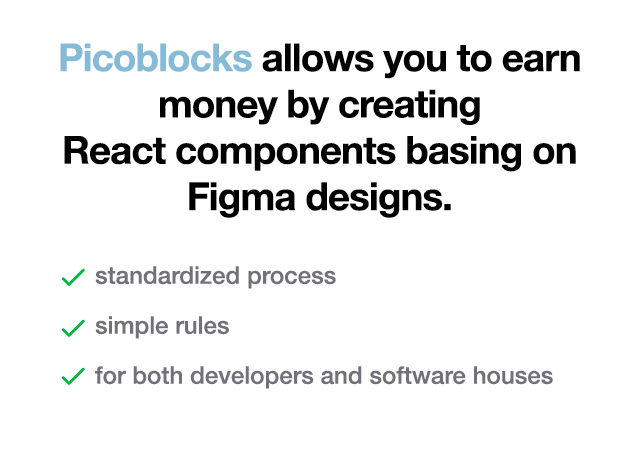
<style>
.page{position:relative;width:640px;height:457px;background:#ffffff}
.page>*{position:absolute;margin:0}
.t1{font:38.6px "HelveticaNeue-Bold";letter-spacing:-0.025em;color:#000000}
.t2{font:38.6px "HelveticaNeue-Bold";letter-spacing:-0.025em;color:#86bbd8}
.t3{font:24.2px/50px "HelveticaNeue-Medium";color:#71717a}
</style>
<div class="page">
<p class="t1" style="left:60px;top:43px;width:520px;height:175px;text-align:center"><span class="t2">Picoblocks </span>allows you to earn money by creating <br>React components basing on <br>Figma designs.</p>
<p class="t3" style="left:95px;top:266px;width:458px;height:123px">standardized process<br>simple rules<br>for both developers and software houses</p>
</div>
